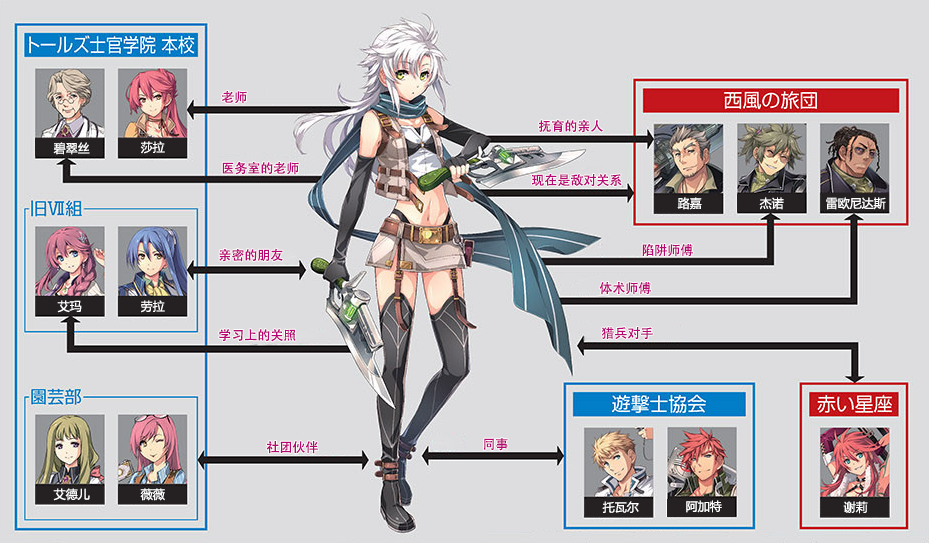
<style>
.page{position:relative;width:929px;height:543px;background:#dddddf}
.page>*{position:absolute;margin:0}
.t1{font:13px "AdobeHeitiStd-Regular";color:#b70773}
.t2{font:12px "MicrosoftYaHei";color:#ffffff}
</style>
<div class="page">
<p class="t1" style="left:221px;top:91px;width:26px;height:13px">老师</p>
<p class="t1" style="left:538px;top:120px;width:65px;height:13px">抚育的亲人</p>
<p class="t2" style="left:53px;top:142px;width:37px;height:13px">碧翠丝</p>
<p class="t2" style="left:140px;top:141px;width:25px;height:13px">莎拉</p>
<p class="t1" style="left:222px;top:161px;width:77px;height:14px">医务室的老师</p>
<p class="t1" style="left:532px;top:173px;width:90px;height:14px">现在是敌对关系</p>
<p class="t2" style="left:677px;top:197px;width:25px;height:13px">路嘉</p>
<p class="t2" style="left:759px;top:197px;width:25px;height:13px">杰诺</p>
<p class="t2" style="left:826px;top:197px;width:60px;height:13px">雷欧尼达斯</p>
<p class="t1" style="left:642px;top:244px;width:51px;height:13px">陷阱师傅</p>
<p class="t1" style="left:219px;top:248px;width:64px;height:14px">亲密的朋友</p>
<p class="t1" style="left:599px;top:282px;width:52px;height:13px">体术师傅</p>
<p class="t2" style="left:57px;top:300px;width:25px;height:13px">艾玛</p>
<p class="t2" style="left:141px;top:300px;width:24px;height:13px">劳拉</p>
<p class="t1" style="left:219px;top:329px;width:77px;height:13px">学习上的关照</p>
<p class="t1" style="left:601px;top:327px;width:52px;height:12px">猎兵对手</p>
<p class="t1" style="left:484px;top:438px;width:24px;height:13px">同事</p>
<p class="t1" style="left:266px;top:441px;width:52px;height:13px">社团伙伴</p>
<p class="t2" style="left:53px;top:488px;width:37px;height:13px">艾德儿</p>
<p class="t2" style="left:140px;top:488px;width:25px;height:13px">薇薇</p>
<p class="t2" style="left:602px;top:501px;width:37px;height:12px">托瓦尔</p>
<p class="t2" style="left:686px;top:500px;width:36px;height:13px">阿加特</p>
<p class="t2" style="left:843px;top:501px;width:25px;height:13px">谢莉</p>
</div>
